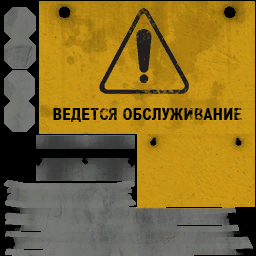
<style>
.page{position:relative;width:256px;height:256px}
.page>*{position:absolute;margin:0}
.t1{font:16px "Arial-Black";color:#000000;scale:0.77 1}
</style>
<div class="page">
<p class="t1" style="left:53px;top:108px;width:189px;height:14px">ВЕДЕТСЯ ОБСЛУЖИВАНИЕ</p>
</div>
